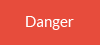
<style>
.page{position:relative;width:100px;height:45px;background:#e74c3c}
.page>*{position:absolute;margin:0}
.t1{font:15px "Lato-Regular";color:#feffff}
</style>
<div class="page">
<p class="t1" style="left:26px;top:16px;width:48px;height:14px">Danger</p>
</div>
